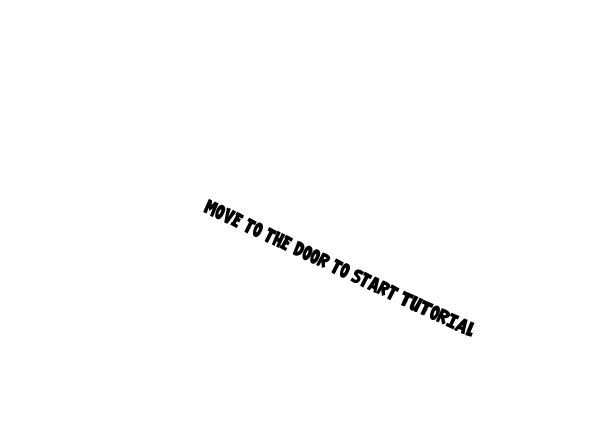
<style>
.page{position:relative;width:607px;height:448px;background:#ffffff}
.page>*{position:absolute;margin:0}
.t1{font:24px "000VTC-GarageSaleTB";color:#000000}
</style>
<div class="page">
<p class="t1" style="left:203px;top:198px;width:272px;height:139px;rotate:25deg">move to the door to start TUTORIAL</p>
</div>
